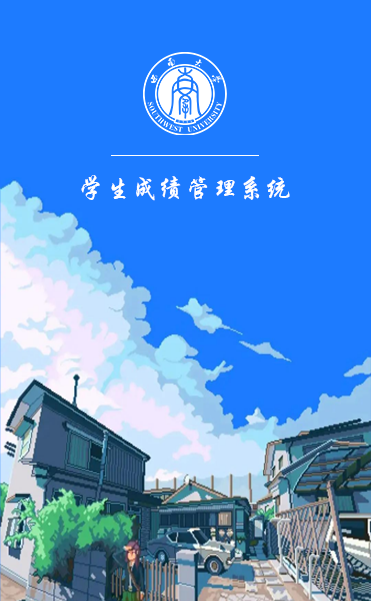
<style>
.page{position:relative;width:371px;height:601px;background:#1d7bff}
.page>*{position:absolute;margin:0}
.t1{font:26.7px "STXingkai";color:#ffffff}
</style>
<div class="page">
<p class="t1" style="left:81px;top:175px;width:209px;height:26px">学生成绩管理系统</p>
</div>
